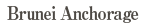
<style>
.page{position:relative;width:145px;height:27px;background:#ffffff}
.page>*{position:absolute;margin:0}
.t1{font:18px "RyuminPro-ExBold";letter-spacing:-0.04em;color:#4c4843;scale:0.9 1}
</style>
<div class="page">
<p class="t1" style="left:7px;top:6px;width:132px;height:17px">Brunei Anchorage</p>
</div>
